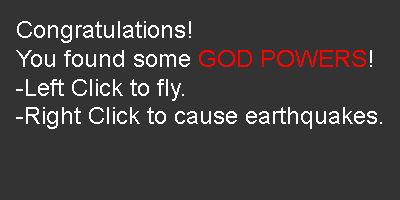
<style>
.page{position:relative;width:400px;height:200px;background:#333333}
.page>*{position:absolute;margin:0}
.t1{font:24px "ArialMT";color:#ffffff}
.t2{font:24px "ArialMT";color:#ff0000}
</style>
<div class="page">
<p class="t1" style="left:16px;top:21px;width:366px;height:108px">Congratulations! <br>You found some <span class="t2">GOD POWERS</span>!<br>-Left Click to fly.<br>-Right Click to cause earthquakes.</p>
</div>
